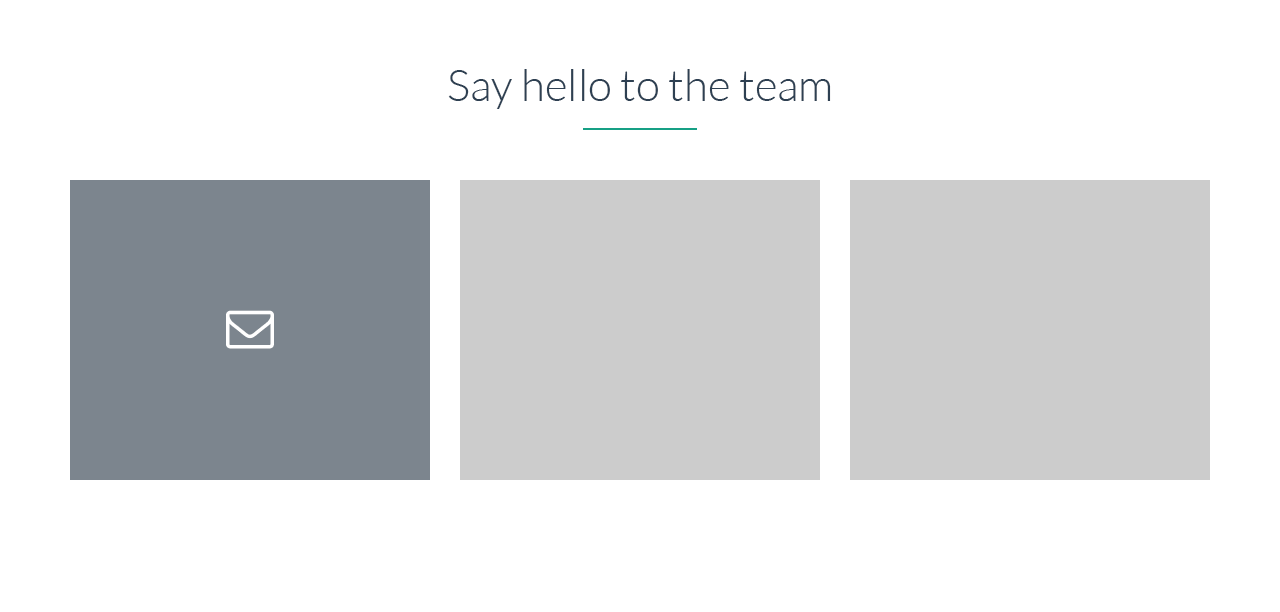
<style>
.page{position:relative;width:1280px;height:612px;background:#ffffff}
.page>*{position:absolute;margin:0}
.t1{font:44px "Lato-Light";color:#2e4052}
</style>
<div class="page">
<p class="t1" style="left:448px;top:69px;width:383px;height:40px">Say hello to the team</p>
</div>
